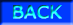
<style>
.page{position:relative;width:73px;height:25px;background:#003afe}
.page>*{position:absolute;margin:0}
.t1{font:17.5px "Verdana";font-weight:bold}
</style>
<div class="page">
<p class="t1" style="left:12px;top:5px;width:50px;height:14px">BACK</p>
</div>
